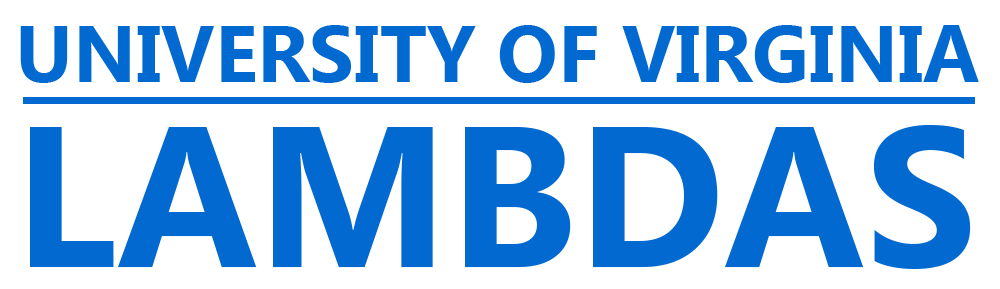
<style>
.page{position:relative;width:1000px;height:289px;background:#ffffff}
.page>*{position:absolute;margin:0}
.t1{font:80px "Ebrima-Bold";color:#0269d0}
.t2{font:200px "Ebrima-Bold";color:#0269d0}
</style>
<div class="page">
<p class="t1" style="left:20px;top:25px;width:959px;height:58px">UNIVERSITY OF VIRGINIA</p>
<p class="t2" style="left:30px;top:125px;width:941px;height:144px">LAMBDAS</p>
</div>
